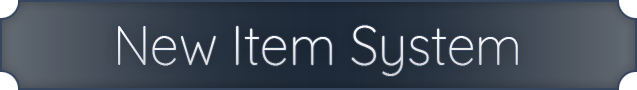
<style>
.page{position:relative;width:637px;height:90px}
.page>*{position:absolute;margin:0}
.t1{font:55.5px "Quicksand-Light";color:#ebebeb;scale:0.93 1}
</style>
<div class="page">
<p class="t1" style="left:118px;top:25px;width:400px;height:51px">New Item System</p>
</div>
